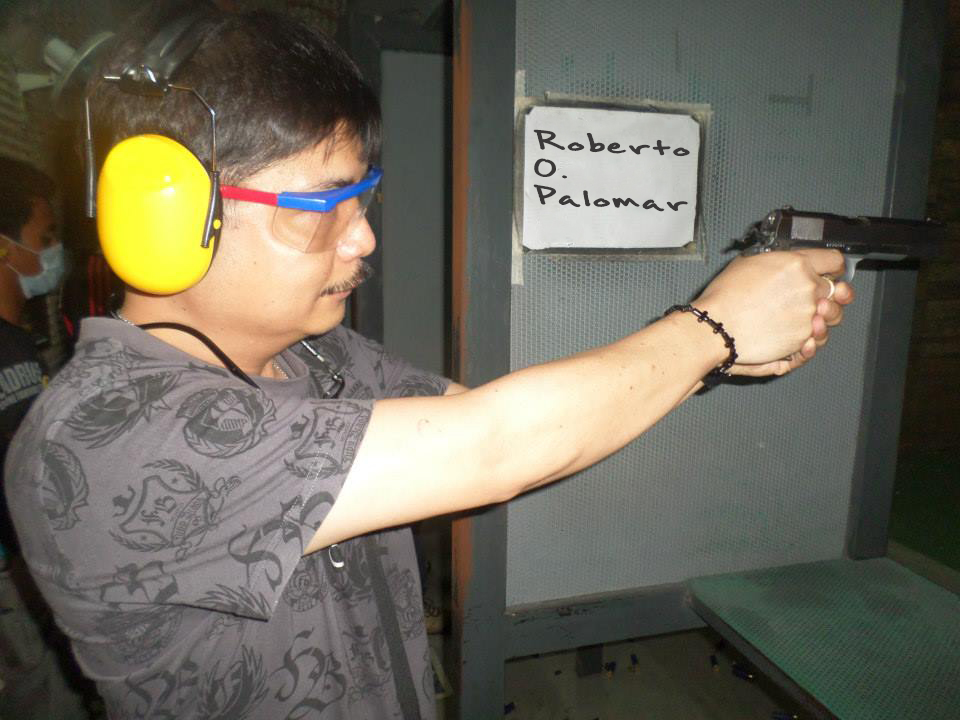
<style>
.page{position:relative;width:960px;height:720px}
.page>*{position:absolute;margin:0}
.t1{font:40.9px/27.3px "BrownBagLunch";color:#3a3838;scale:1.54 1}
</style>
<div class="page">
<p class="t1" style="left:533px;top:129px;width:157px;height:83px;rotate:3deg">Roberto <br>O. <br>Palomar</p>
</div>
